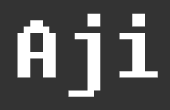
<style>
.page{position:relative;width:170px;height:110px;background:#333333}
.page>*{position:absolute;margin:0}
.t1{font:102px "Fixedsys";color:#ffffff}
</style>
<div class="page">
<p class="t1" style="left:17px;top:13px;width:141px;height:84px">Aji</p>
</div>
